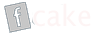
<style>
.page{position:relative;width:98px;height:33px;background:#ffffff}
.page>*{position:absolute;margin:0}
.t1{font:28.9px "LucidaSans";color:#fdf4f4;scale:0.95 1}
</style>
<div class="page">
<p class="t1" style="left:33px;top:3px;width:58px;height:24px">cake</p>
</div>
